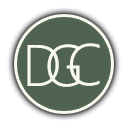
<style>
.page{position:relative;width:128px;height:128px;background:#ffffff}
.page>*{position:absolute;margin:0}
.t1{font:58.3px "SegoeUI-Light";color:#fafaf0}
</style>
<div class="page">
<p class="t1" style="left:27px;top:45px;width:32px;height:41px">D</p>
<p class="t1" style="left:47px;top:44px;width:33px;height:43px">G</p>
<p class="t1" style="left:69px;top:43px;width:31px;height:43px">C</p>
</div>
